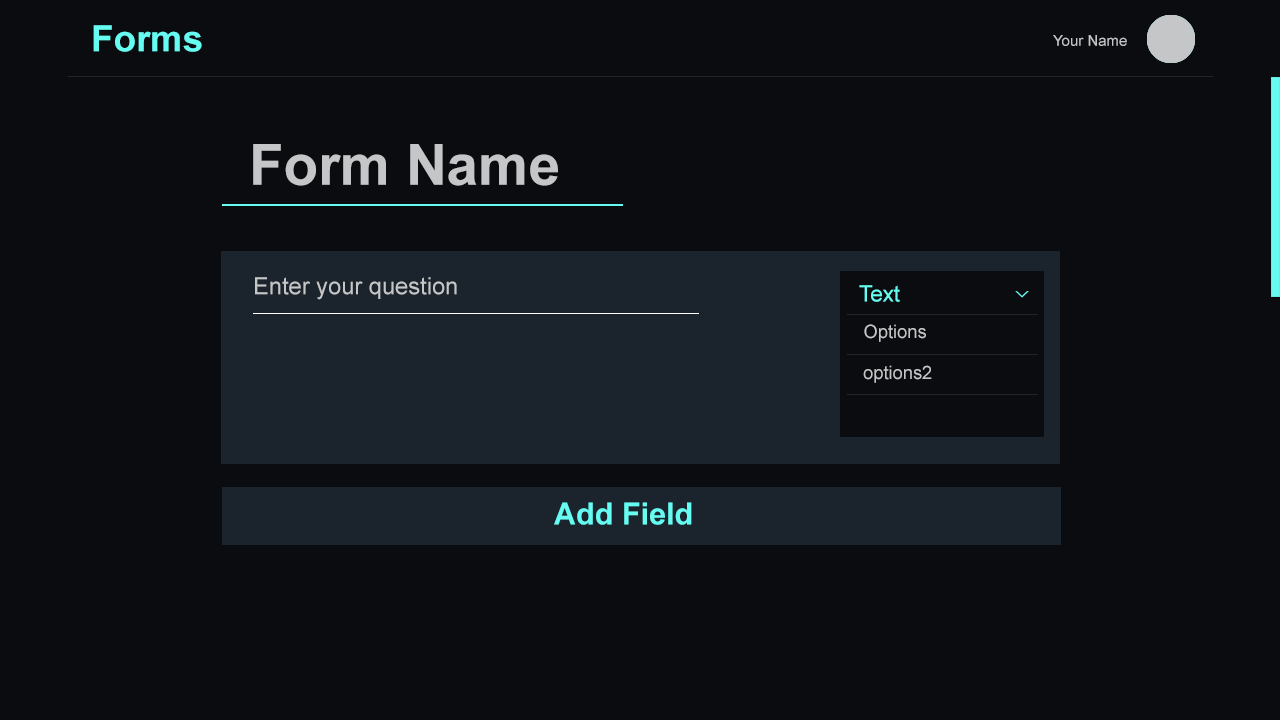
<style>
.page{position:relative;width:1280px;height:720px;background:#0b0c10}
.page>*{position:absolute;margin:0}
.t1{font:36.4px "Arial-BoldMT";color:#66fcf1}
.t2{font:15px "ArialMT";color:#c5c6c7}
.t3{font:56.7px "Arial-BoldMT";color:#c5c6c7}
.t4{font:23.7px "ArialMT";color:#c5c6c7}
.t5{font:22.8px "ArialMT";color:#66fcf1}
.t6{font:18.3px "ArialMT";color:#c5c6c7}
.t7{font:30.8px "Arial-BoldMT";color:#66fcf1}
</style>
<div class="page">
<p class="t1" style="left:93px;top:25px;width:109px;height:27px">Forms</p>
<p class="t2" style="left:1053px;top:35px;width:74px;height:11px">Your Name</p>
<p class="t3" style="left:253px;top:144px;width:305px;height:42px">Form Name</p>
<p class="t4" style="left:255px;top:277px;width:202px;height:23px">Enter your question</p>
<p class="t5" style="left:859px;top:285px;width:41px;height:17px">Text</p>
<p class="t6" style="left:864px;top:324px;width:62px;height:18px">Options</p>
<p class="t6" style="left:863px;top:365px;width:69px;height:18px">options2</p>
<p class="t7" style="left:554px;top:502px;width:138px;height:23px">Add Field</p>
</div>
